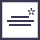
<style>
.page{position:relative;width:40px;height:40px;background:#ffffff}
.page>*{position:absolute;margin:0}
.t1{font:18px "Aller";color:#383851;text-transform:uppercase}
</style>
<div class="page">
<p class="t1" style="left:27px;top:7px;width:8px;height:8px">*</p>
</div>
